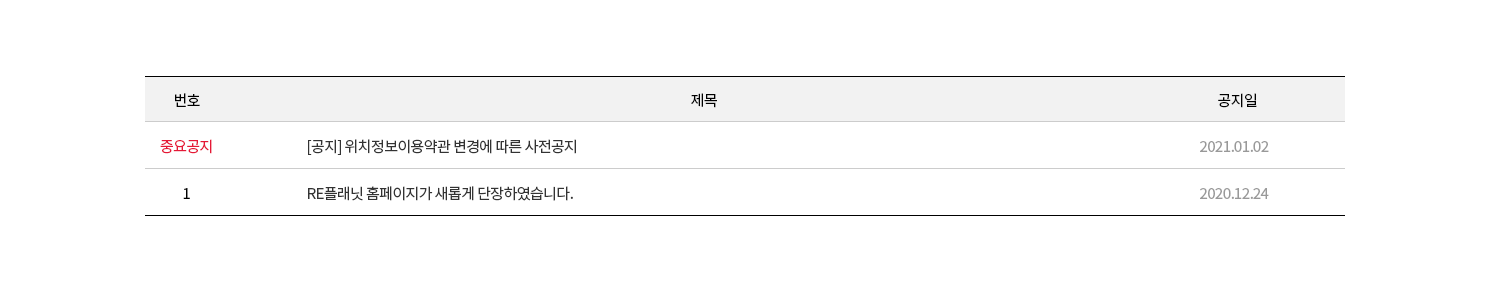
<style>
.page{position:relative;width:1500px;height:300px;background:#ffffff}
.page>*{position:absolute;margin:0}
.t1{font:15px "NotoSansKR-Regular";letter-spacing:-0.04em;color:#000000}
.t2{font:15px/47px "NotoSansKR-Regular";letter-spacing:-0.04em;color:#e51837}
.t3{font:15px/47px "NotoSansKR-Regular";letter-spacing:-0.04em;color:#000000}
.t4{font:15px/47px "NotoSansKR-Regular";letter-spacing:-0.04em;color:#333333}
.t5{font:15px/47px "NotoSansKR-Regular";letter-spacing:-0.04em;color:#999999}
</style>
<div class="page">
<p class="t1" style="left:175px;top:93px;width:25px;height:14px">번호</p>
<p class="t1" style="left:691px;top:93px;width:26px;height:15px">제목</p>
<p class="t1" style="left:1218px;top:93px;width:39px;height:15px">공지일</p>
<p class="t2" style="left:160px;top:139px;width:52px;height:60px;text-align:center">중요공지<br><span class="t3">1</span></p>
<p class="t4" style="left:308px;top:139px;width:268px;height:62px">[공지] 위치정보이용약관 변경에 따른 사전공지<br>RE플래닛 홈페이지가 새롭게 단장하였습니다.</p>
<p class="t5" style="left:1200px;top:141px;width:69px;height:58px">2021.01.02<br>2020.12.24</p>
</div>
